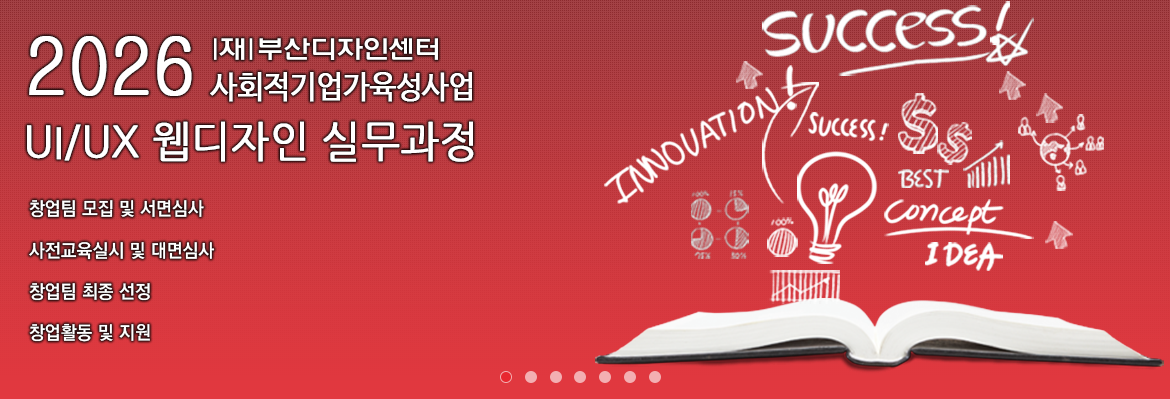
<style>
.page{position:relative;width:1170px;height:399px}
.page>*{position:absolute;margin:0}
.t1{font:78.7px "Gulim";color:#ffffff;text-transform:uppercase;font-weight:bold;scale:0.9 1}
.t2{font:31.8px "NanumBarunGothic";color:#ffffff;text-transform:uppercase;font-weight:bold;scale:0.9 1}
.t3{font:42.8px "NanumGothic";color:#ffffff;text-transform:uppercase;font-weight:bold;scale:0.95 1}
.t4{font:18.6px "YGO540";color:#ffffff;text-transform:uppercase;scale:0.95 1}
</style>
<div class="page">
<p class="t1" style="left:29px;top:36px;width:163px;height:60px">2026</p>
<p class="t1" style="left:29px;top:36px;width:163px;height:60px">2026</p>
<p class="t2" style="left:210px;top:72px;width:262px;height:30px">사회적기업가육성사업</p>
<p class="t2" style="left:210px;top:72px;width:262px;height:30px">사회적기업가육성사업</p>
<p class="t3" style="left:27px;top:121px;width:447px;height:41px">UI/UX 웹디자인 실무과정</p>
<p class="t3" style="left:27px;top:121px;width:447px;height:41px">UI/UX 웹디자인 실무과정</p>
<p class="t4" style="left:29px;top:200px;width:175px;height:18px">창업팀 모집 및 서면심사</p>
<p class="t4" style="left:29px;top:200px;width:175px;height:18px">창업팀 모집 및 서면심사</p>
<p class="t4" style="left:29px;top:242px;width:186px;height:18px">사전교육실시 및 대면심사</p>
<p class="t4" style="left:29px;top:242px;width:186px;height:18px">사전교육실시 및 대면심사</p>
<p class="t4" style="left:29px;top:283px;width:121px;height:18px">창업팀 최종 선정</p>
<p class="t4" style="left:29px;top:283px;width:121px;height:18px">창업팀 최종 선정</p>
<p class="t4" style="left:29px;top:323px;width:121px;height:19px">창업활동 및 지원</p>
<p class="t4" style="left:29px;top:323px;width:121px;height:19px">창업활동 및 지원</p>
</div>
